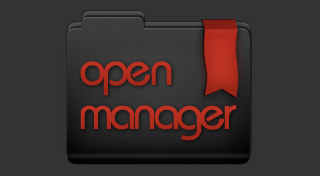
<style>
.page{position:relative;width:320px;height:176px;background:#333333}
.page>*{position:absolute;margin:0}
.t1{font:48px "Bauhaus";letter-spacing:-0.075em;color:#b22e1f}
.t2{font:48px "Bauhaus";letter-spacing:-0.075em;color:#b22e20}
</style>
<div class="page">
<p class="t1" style="left:80px;top:61px;width:92px;height:35px">open</p>
<p class="t2" style="left:80px;top:105px;width:157px;height:36px">manager</p>
</div>
